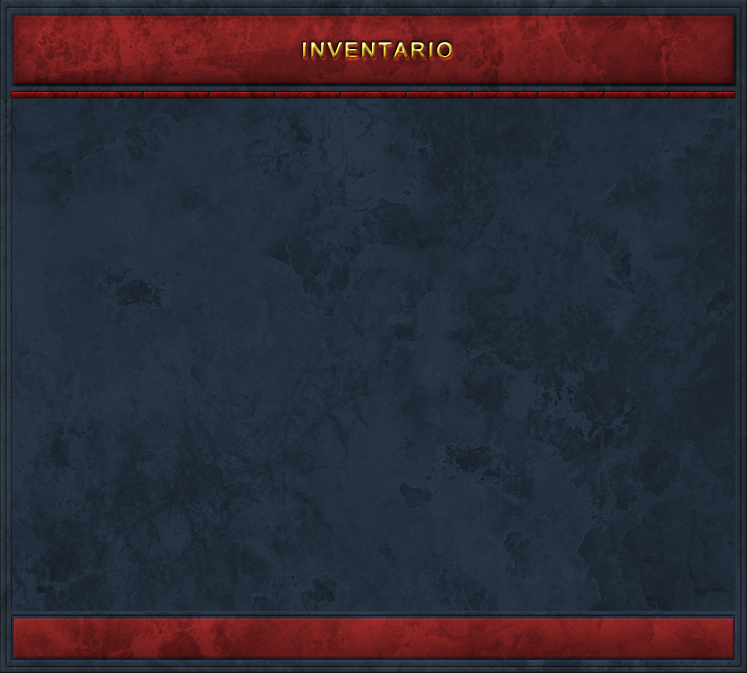
<style>
.page{position:relative;width:747px;height:673px}
.page>*{position:absolute;margin:0}
.t1{font:20.8px "ArialMT";letter-spacing:0.1em;font-weight:bold}
</style>
<div class="page">
<p class="t1" style="left:303px;top:42px;width:150px;height:17px">INVENTARIO</p>
</div>
